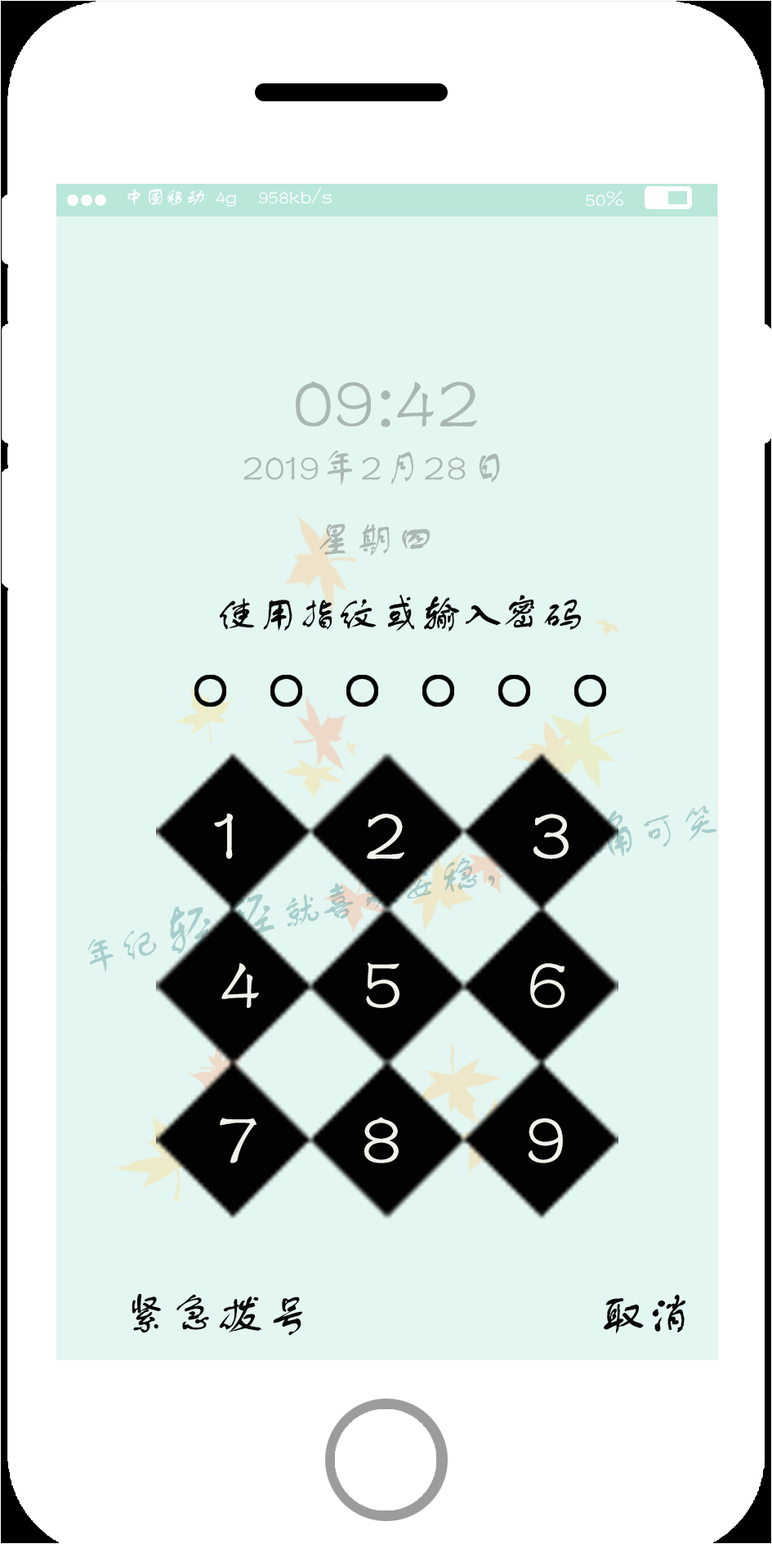
<style>
.page{position:relative;width:772px;height:1544px;background:#e4f6f1}
.page>*{position:absolute;margin:0}
.t1{font:81.7px "FZSTK--GBK1-0";color:#aab7b3}
.t2{font:40.9px "FZSTK--GBK1-0";color:#aab7b3}
.t3{font:40.9px "FZSTK--GBK1-0";color:#050505}
.t4{font:81.7px "FZSTK--GBK1-0";color:#f2f1eb}
.t5{font:47.7px "FZSTK--GBK1-0";color:#070707}
</style>
<div class="page">
<p class="t1" style="left:296px;top:382px;width:181px;height:45px">09:42</p>
<p class="t2" style="left:243px;top:450px;width:257px;height:106px">2019年2月28日<br>       星期四</p>
<p class="t3" style="left:219px;top:595px;width:363px;height:37px">使用指纹或输入密码</p>
<p class="t4" style="left:214px;top:813px;width:355px;height:47px">1      2      3</p>
<p class="t4" style="left:221px;top:963px;width:344px;height:45px">4     5      6</p>
<p class="t4" style="left:220px;top:1117px;width:343px;height:47px">7     8      9</p>
<p class="t5" style="left:132px;top:1293px;width:554px;height:43px">紧急拨号                        取消</p>
</div>
